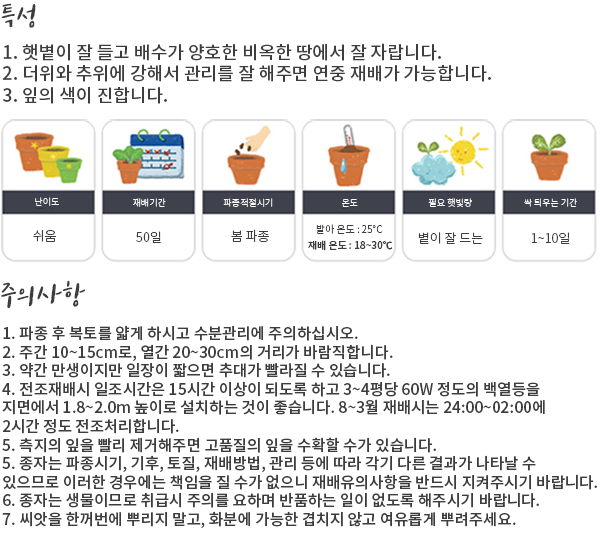
<style>
.page{position:relative;width:600px;height:548px;background:#ffffff}
.page>*{position:absolute;margin:0}
.t1{font:35px "tvNEnjoystoriesB";color:#3d3d3d}
.t2{font:18.1px "NotoSansKR-Medium";color:#3d3d3d}
.t3{font:9px "NotoSansKR-Light";color:#ffffff}
.t4{font:13px "NotoSansKR-Light";color:#3d3d3d}
.t5{font:10px "NotoSansKR-Light";color:#3d3d3d}
.t6{font:10px "NotoSansKR-Medium";color:#3d3d3d}
.t7{font:15.5px "NotoSansKR-Medium";color:#3d3d3d}
</style>
<div class="page">
<p class="t1" style="left:1px;top:3px;width:35px;height:25px">특성</p>
<p class="t2" style="left:2px;top:43px;width:489px;height:61px">1. 햇볕이 잘 들고 배수가 양호한 비옥한 땅에서 잘 자랍니다.<br>2. 더위와 추위에 강해서 관리를 잘 해주면 연중 재배가 가능합니다.<br>3. 잎의 색이 진합니다.</p>
<p class="t3" style="left:35px;top:197px;width:24px;height:9px">난이도</p>
<p class="t3" style="left:133px;top:198px;width:33px;height:9px">재배기간</p>
<p class="t3" style="left:223px;top:198px;width:50px;height:9px">파종적절시기</p>
<p class="t3" style="left:428px;top:198px;width:44px;height:9px">필요 햇빛량</p>
<p class="t3" style="left:524px;top:198px;width:53px;height:9px">싹 틔우는 기간</p>
<p class="t3" style="left:342px;top:199px;width:16px;height:8px">온도</p>
<p class="t4" style="left:33px;top:229px;width:23px;height:13px">쉬움</p>
<p class="t4" style="left:136px;top:231px;width:25px;height:12px">50일</p>
<p class="t4" style="left:231px;top:229px;width:38px;height:13px">봄 파종</p>
<p class="t5" style="left:316px;top:224px;width:67px;height:10px">발아 온도 : 25℃</p>
<p class="t4" style="left:418px;top:232px;width:65px;height:12px">볕이 잘 드는</p>
<p class="t4" style="left:531px;top:232px;width:39px;height:12px">1~10일</p>
<p class="t6" style="left:308px;top:240px;width:85px;height:11px">재배 온도 : 18~30℃</p>
<p class="t1" style="left:1px;top:280px;width:84px;height:29px">주의사항</p>
<p class="t7" style="left:2px;top:325px;width:595px;height:203px">1. 파종 후 복토를 얇게 하시고 수분관리에 주의하십시오.<br>2. 주간 10~15cm로, 열간 20~30cm의 거리가 바람직합니다.<br>3. 약간 만생이지만 일장이 짧으면 추대가 빨라질 수 있습니다.<br>4. 전조재배시 일조시간은 15시간 이상이 되도록 하고 3~4평당 60W 정도의 백열등을 <br>지면에서 1.8~2.0m 높이로 설치하는 것이 좋습니다. 8~3월 재배시는 24:00~02:00에 <br>2시간 정도 전조처리합니다. <br>5. 측지의 잎을 빨리 제거해주면 고품질의 잎을 수확할 수가 있습니다.<br>5. 종자는 파종시기, 기후, 토질, 재배방법, 관리 등에 따라 각기 다른 결과가 나타날 수 <br>있으므로 이러한 경우에는 책임을 질 수가 없으니 재배유의사항을 반드시 지켜주시기 바랍니다.<br>6. 종자는 생물이므로 취급시 주의를 요하며 반품하는 일이 없도록 해주시기 바랍니다.<br>7. 씨앗을 한꺼번에 뿌리지 말고, 화분에 가능한 겹치지 않고 여유롭게 뿌려주세요.</p>
</div>
